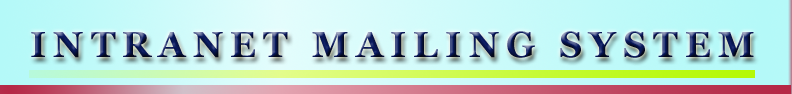
<style>
.page{position:relative;width:792px;height:94px}
.page>*{position:absolute;margin:0}
.t1{font:36px "Georgia-Bold";letter-spacing:0.2em}
</style>
<div class="page">
<p class="t1" style="left:31px;top:31px;width:723px;height:27px">INTRANET MAILING SYSTEM</p>
</div>
